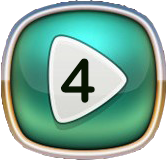
<style>
.page{position:relative;width:166px;height:160px}
.page>*{position:absolute;margin:0}
.t1{font:60px "ArialRoundedMTBold";letter-spacing:0.1em;color:#071401}
</style>
<div class="page">
<p class="t1" style="left:61px;top:58px;width:34px;height:45px">4</p>
</div>
